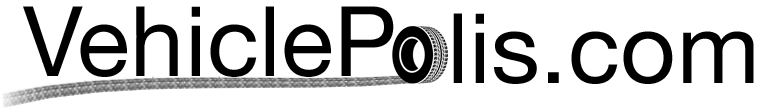
<style>
.page{position:relative;width:757px;height:111px;background:#ffffff}
.page>*{position:absolute;margin:0}
.t1{font:97.2px "HelveticaNeue";letter-spacing:0.005em;color:#000000}
</style>
<div class="page">
<p class="t1" style="left:23px;top:6px;width:371px;height:71px">VehicleP</p>
<p class="t1" style="left:453px;top:13px;width:301px;height:71px">lis.com</p>
</div>
